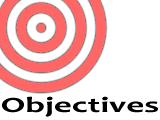
<style>
.page{position:relative;width:160px;height:120px;background:#ffffff}
.page>*{position:absolute;margin:0}
.t1{font:22px "Candara-Bold";color:#000000;scale:1.6 1}
</style>
<div class="page">
<p class="t1" style="left:2px;top:96px;width:156px;height:21px">Objectives</p>
</div>
